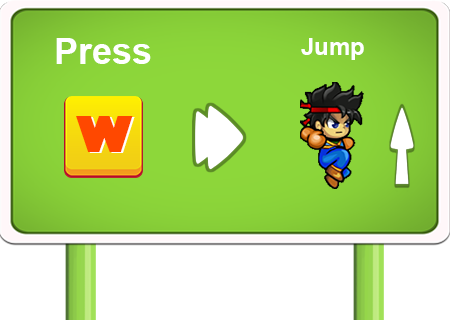
<style>
.page{position:relative;width:450px;height:320px;background:#ffffff}
.page>*{position:absolute;margin:0}
.t1{font:36px "Arial-BoldMT";color:#ffffff}
.t2{font:24px "Arial-BoldMT";color:#ffffff}
.t3{font:48px "GillSans-UltraBold";color:#ff4800;scale:0.96 1}
</style>
<div class="page">
<p class="t1" style="left:56px;top:38px;width:95px;height:26px">Press</p>
<p class="t2" style="left:301px;top:38px;width:63px;height:22px">Jump</p>
<p class="t3" style="left:76px;top:116px;width:57px;height:36px">W</p>
<p class="t3" style="left:78px;top:117px;width:57px;height:36px">W</p>
</div>
